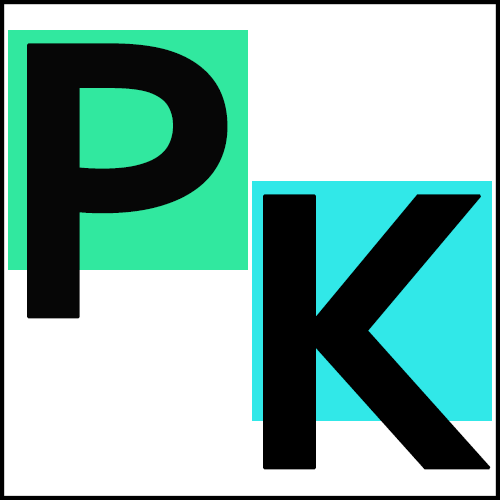
<style>
.page{position:relative;width:500px;height:500px;background:#ffffff}
.page>*{position:absolute;margin:0}
.t1{font:416.7px "Corbel-Bold";color:#070707;font-weight:bold}
.t2{font:416.7px "Corbel-Bold";color:#000000;font-weight:bold}
</style>
<div class="page">
<p class="t1" style="left:27px;top:43px;width:201px;height:276px">P</p>
<p class="t2" style="left:263px;top:194px;width:228px;height:276px">K</p>
</div>
